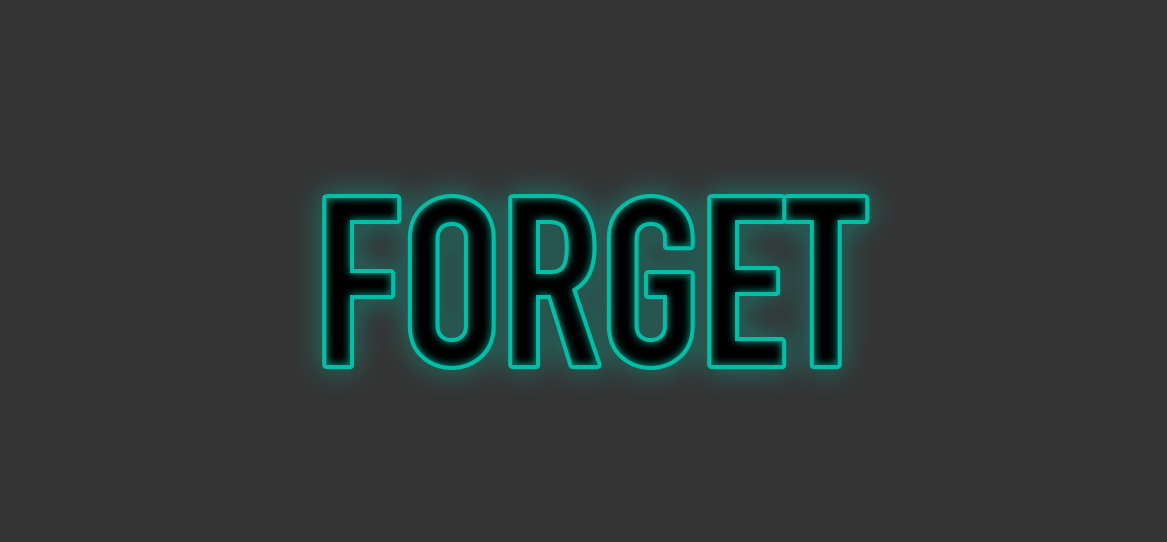
<style>
.page{position:relative;width:1167px;height:542px;background:#333333}
.page>*{position:absolute;margin:0}
.t1{font:233.7px "DINEngschrift";text-transform:uppercase}
</style>
<div class="page">
<p class="t1" style="left:326px;top:198px;width:540px;height:168px">forget</p>
</div>
